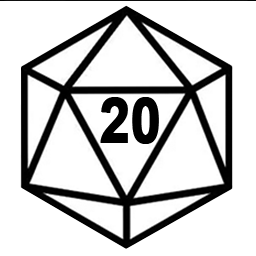
<style>
.page{position:relative;width:256px;height:256px;background:#ffffff}
.page>*{position:absolute;margin:0}
.t1{font:63.2px "Arial-BoldMT";color:#000000;font-weight:bold;scale:0.86 1}
</style>
<div class="page">
<p class="t1" style="left:100px;top:96px;width:59px;height:47px">20</p>
</div>
